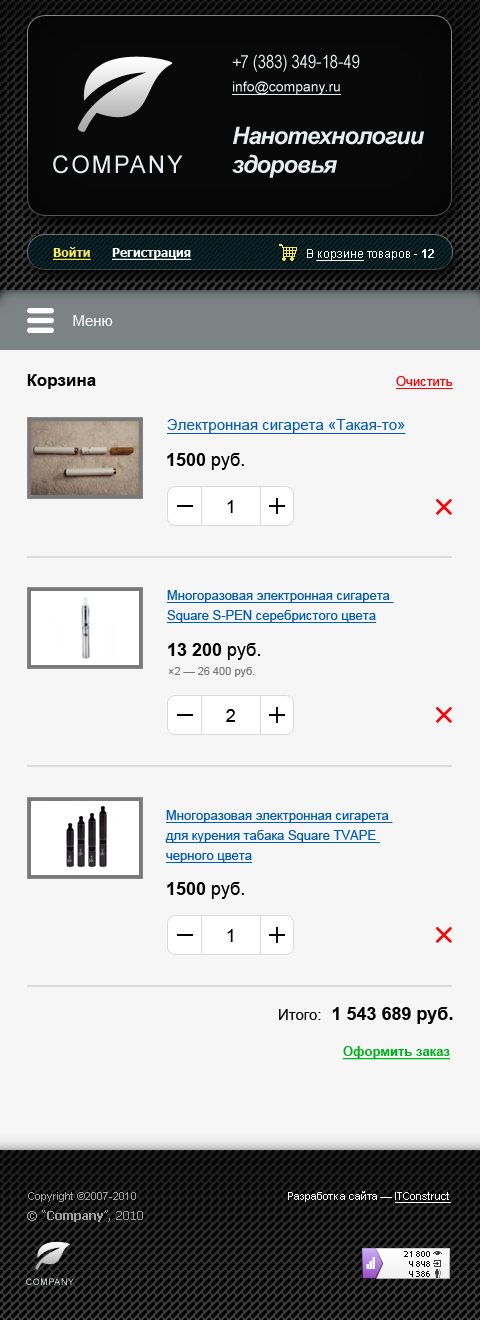
<style>
.page{position:relative;width:480px;height:1320px;background:#f6f6f6}
.page>*{position:absolute;margin:0}
.t1{font:17px "Arial-BoldMT";color:#000000}
.t2{font:13px "ArialMT";color:#ff0000;text-decoration:underline}
.t3{font:15px "ArialMT";color:#005bc1;text-decoration:underline}
.t4{font:18px "Arial-BoldMT";color:#000000}
.t5{font:18px "ArialMT";color:#000000}
.t6{font:13px/20px "ArialMT";color:#005bc1;text-decoration:underline}
.t7{font:11px "ArialMT";color:#797979}
.t8{font:15px "ArialMT";color:#000000}
.t9{font:13px "Arial-BoldMT";color:#00b31d;text-decoration:underline}
</style>
<div class="page">
<p class="t1" style="left:27px;top:374px;width:69px;height:15px">Корзина</p>
<p class="t2" style="left:396px;top:376px;width:57px;height:13px">Очистить</p>
<p class="t3" style="left:167px;top:419px;width:239px;height:15px">Электронная сигарета «Такая-то»</p>
<p class="t4" style="left:167px;top:453px;width:77px;height:17px">1500 <span class="t5">руб.</span></p>
<p class="t5" style="left:227px;top:500px;width:6px;height:13px">1</p>
<p class="t6" style="left:167px;top:590px;width:227px;height:33px">Многоразовая электронная сигарета <br>Square S-PEN серебристого цвета</p>
<p class="t4" style="left:168px;top:643px;width:93px;height:17px">13 200 <span class="t5">руб.</span></p>
<p class="t7" style="left:169px;top:667px;width:86px;height:10px">×2 — 26 400 руб.</p>
<p class="t5" style="left:226px;top:709px;width:9px;height:13px">2</p>
<p class="t6" style="left:165px;top:810px;width:228px;height:53px">Многоразовая электронная сигарета <br>для курения табака Square TVAPE <br>черного цвета</p>
<p class="t4" style="left:167px;top:882px;width:77px;height:17px">1500 <span class="t5">руб.</span></p>
<p class="t5" style="left:227px;top:929px;width:6px;height:13px">1</p>
<p class="t4" style="left:279px;top:1007px;width:174px;height:17px"><span class="t8">Итого:  </span>1 543 689 руб.</p>
<p class="t9" style="left:343px;top:1046px;width:107px;height:14px">Оформить заказ</p>
</div>
